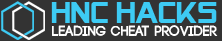
<style>
.page{position:relative;width:222px;height:41px;background:#333333}
.page>*{position:absolute;margin:0}
.t1{font:30.1px "AlienEncountersSolid";color:#3dcbf4}
.t2{font:14.9px "Code-Bold";letter-spacing:0.015em;color:#ffffff;scale:0.92 1}
</style>
<div class="page">
<p class="t1" style="left:51px;top:2px;width:166px;height:21px">HNC HAcks</p>
<p class="t2" style="left:52px;top:25px;width:166px;height:11px">Leading Cheat Provider</p>
</div>
